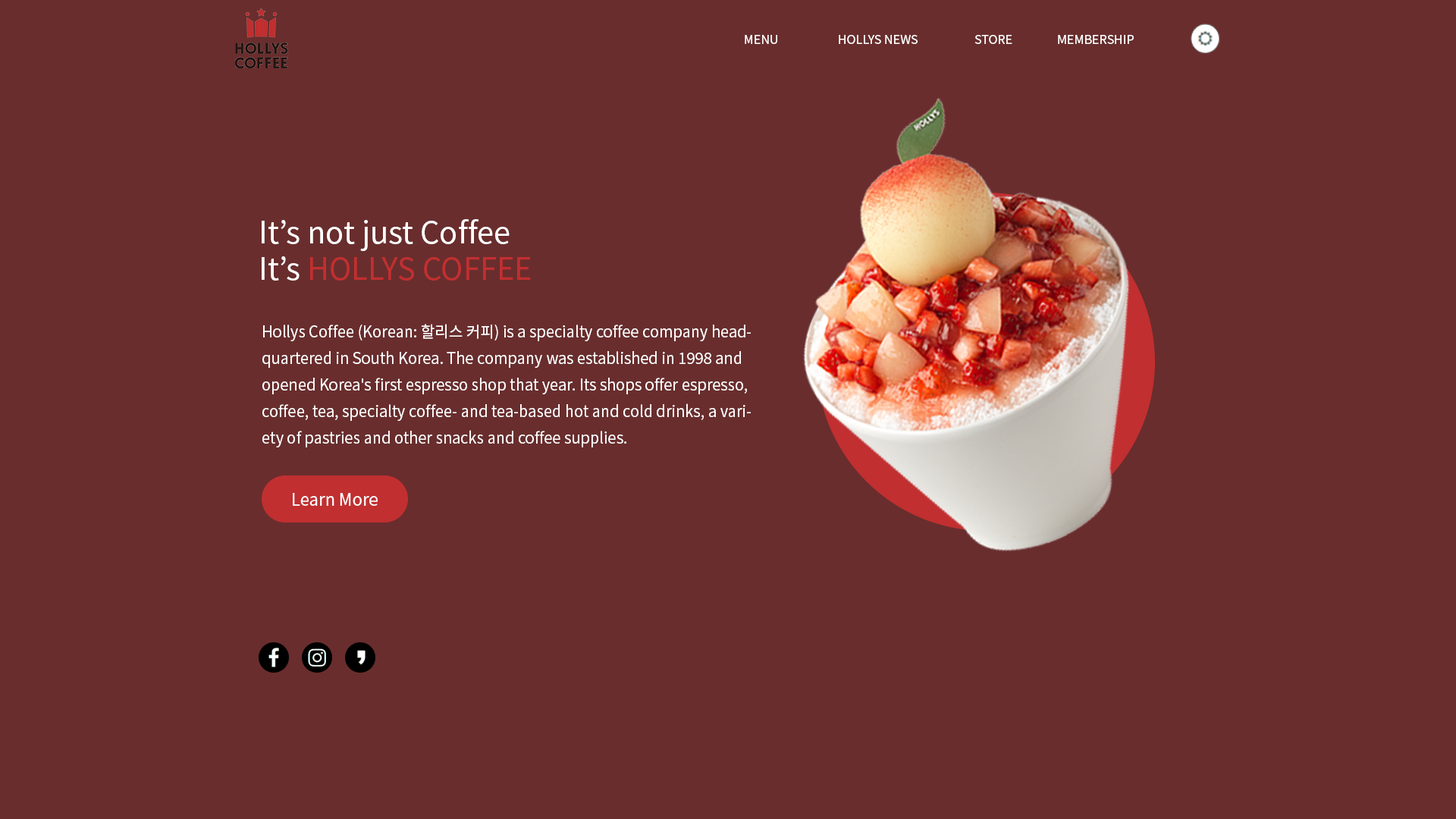
<style>
.page{position:relative;width:1456px;height:819px;background:#692d2d}
.page>*{position:absolute;margin:0}
.t1{font:12.1px "NotoSansKR-Regular";color:#ffffff}
.t2{font:30.3px "NotoSansKR-Regular";color:#ffffff}
.t3{font:30.3px "NotoSansKR-Regular";color:#c12f30}
.t4{font:15.6px/26.5px "NotoSansKR-Regular";color:#ffffff}
.t5{font:17.2px "NotoSansKR-Regular";color:#ffffff}
</style>
<div class="page">
<p class="t1" style="left:745px;top:35px;width:32px;height:9px">MENU</p>
<p class="t1" style="left:839px;top:35px;width:79px;height:9px">HOLLYS NEWS</p>
<p class="t1" style="left:974px;top:35px;width:38px;height:9px">STORE</p>
<p class="t1" style="left:1058px;top:35px;width:76px;height:9px">MEMBERSHIP</p>
<p class="t2" style="left:262px;top:219px;width:269px;height:62px">It’s not just Coffee <br>It’s <span class="t3">HOLLYS COFFEE</span></p>
<p class="t4" style="left:262px;top:324px;width:489px;height:123px">Hollys Coffee (Korean: 할리스 커피) is a specialty coffee company headquartered in South Korea. The company was established in 1998 and opened Korea's first espresso shop that year. Its shops offer espresso, coffee, tea, specialty coffee- and tea-based hot and cold drinks, a variety of pastries and other snacks and coffee supplies.</p>
<p class="t5" style="left:293px;top:493px;width:85px;height:13px">Learn More</p>
</div>
